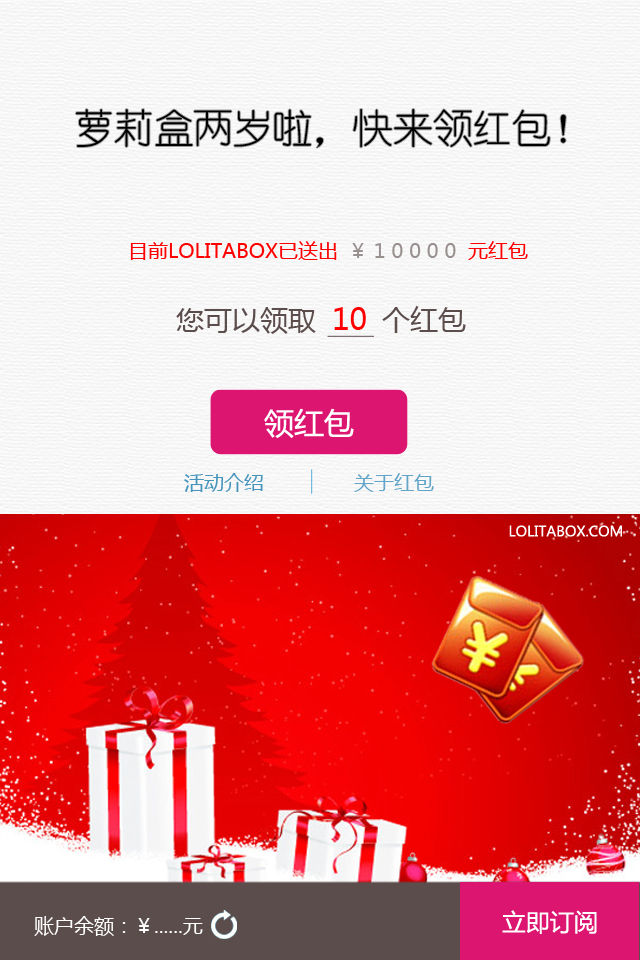
<style>
.page{position:relative;width:640px;height:960px}
.page>*{position:absolute;margin:0}
.t1{font:39.8px "YouYuan";color:#000000}
.t2{font:20px "MicrosoftYaHei";color:#fe0000}
.t3{font:20px "MicrosoftYaHei";color:#ff0000}
.t4{font:20px "MicrosoftYaHei";color:#988f8f}
.t5{font:28px "MicrosoftYaHei";color:#5c4d4d}
.t6{font:30px "MicrosoftYaHei";color:#ff0000}
.t7{font:30px "MicrosoftYaHei";color:#ffffff}
.t8{font:20px "MicrosoftYaHei";color:#4695bd}
.t9{font:20px "MicrosoftYaHei";color:#62a5c8}
.t10{font:14px "MicrosoftYaHei";color:#ffffff}
.t11{font:20px "MicrosoftYaHei";color:#ffffff}
.t12{font:20px "MicrosoftYaHei";color:#fffefe}
.t13{font:24px "MicrosoftYaHei";color:#ffffff}
</style>
<div class="page">
<p class="t1" style="left:75px;top:109px;width:491px;height:39px">萝莉盒两岁啦，快来领红包！</p>
<p class="t2" style="left:130px;top:241px;width:398px;height:19px">目前LOLITABOX已送出                      <span class="t3">元红包</span></p>
<p class="t4" style="left:352px;top:243px;width:104px;height:15px">￥ 1 0 0 0 0</p>
<p class="t5" style="left:176px;top:306px;width:290px;height:28px">您可以领取        个红包</p>
<p class="t6" style="left:334px;top:307px;width:32px;height:23px">10</p>
<p class="t7" style="left:264px;top:408px;width:90px;height:30px">领红包</p>
<p class="t8" style="left:184px;top:473px;width:79px;height:19px">活动介绍</p>
<p class="t9" style="left:354px;top:473px;width:80px;height:19px">关于红包</p>
<p class="t10" style="left:509px;top:525px;width:113px;height:12px">LOLITABOX.COM</p>
<p class="t11" style="left:34px;top:916px;width:169px;height:20px">账户余额：<span class="t12">￥</span>......元</p>
<p class="t13" style="left:502px;top:910px;width:95px;height:24px">立即订阅</p>
</div>
